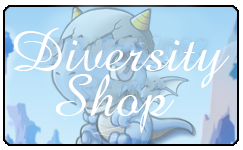
<style>
.page{position:relative;width:243px;height:150px}
.page>*{position:absolute;margin:0}
.t1{font:60px "AmazoneBT-Regular";color:#ffffff}
</style>
<div class="page">
<p class="t1" style="left:13px;top:28px;width:217px;height:60px">Diversity</p>
<p class="t1" style="left:55px;top:74px;width:119px;height:59px">Shop</p>
</div>
